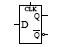
<style>
.page{position:relative;width:60px;height:47px;background:#ffffff}
.page>*{position:absolute;margin:0}
.t1{font:8px "TimesNewRomanPSMT";color:#000000;font-variant:small-caps}
.t2{font:10px "TimesNewRomanPSMT";color:#000000;font-variant:small-caps}
</style>
<div class="page">
<p class="t1" style="left:34px;top:13px;width:6px;height:8px">Q</p>
<p class="t2" style="left:21px;top:21px;width:8px;height:7px">D</p>
<p class="t1" style="left:34px;top:32px;width:6px;height:8px">Q</p>
</div>
